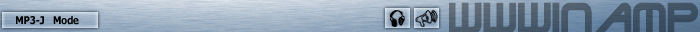
<style>
.page{position:relative;width:700px;height:32px}
.page>*{position:absolute;margin:0}
.t1{font:48px "TerminatorTwo";color:#485969;scale:0.9 1}
.t2{font:10.5px "Tahoma-Bold";color:#000000;scale:0.9 1}
</style>
<div class="page">
<p class="t1" style="left:449px;top:2px;width:249px;height:32px">WWWinamp</p>
<p class="t2" style="left:16px;top:16px;width:63px;height:9px">MP3-J   Mode</p>
</div>
